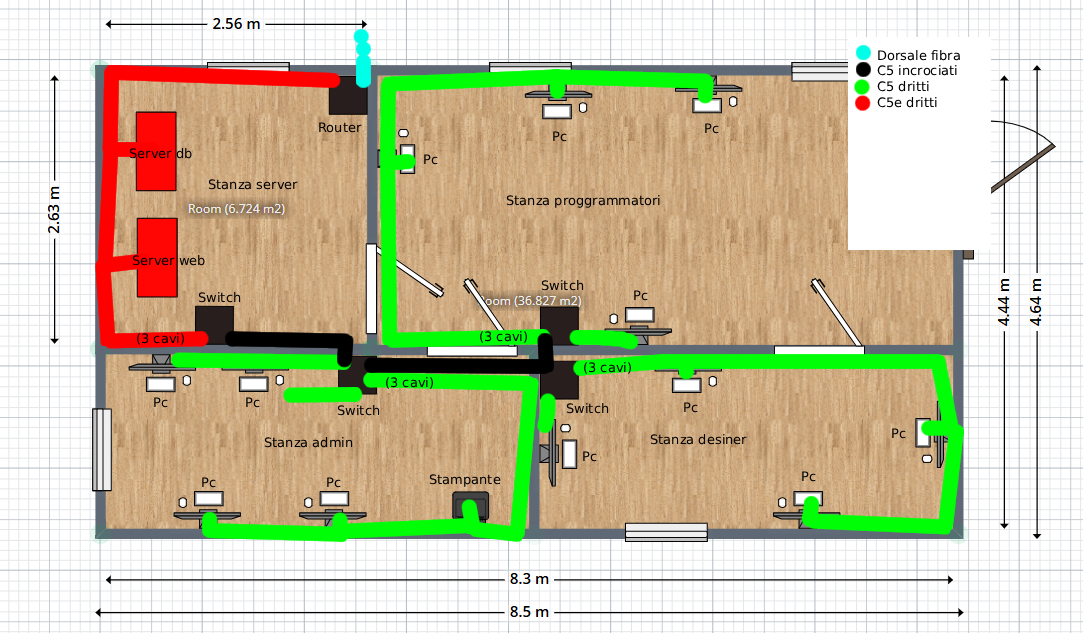
<style>
.page{position:relative;width:1083px;height:633px;background:#ffffff}
.page>*{position:absolute;margin:0}
.t1{font:13px "DejaVuSans";color:#000000}
</style>
<div class="page">
<p class="t1" style="left:877px;top:50px;width:83px;height:58px">Dorsale fibra<br>C5 incrociati<br>C5 dritti<br>C5e dritti</p>
<p class="t1" style="left:319px;top:122px;width:43px;height:11px">Router</p>
<p class="t1" style="left:705px;top:123px;width:14px;height:11px">Pc</p>
<p class="t1" style="left:553px;top:131px;width:14px;height:11px">Pc</p>
<p class="t1" style="left:129px;top:148px;width:63px;height:11px">Server db</p>
<p class="t1" style="left:424px;top:154px;width:14px;height:11px">Pc</p>
<p class="t1" style="left:208px;top:179px;width:90px;height:11px">Stanza server</p>
<p class="t1" style="left:506px;top:195px;width:154px;height:13px">Stanza proggrammatori</p>
<p class="t1" style="left:132px;top:255px;width:73px;height:11px">Server web</p>
<p class="t1" style="left:541px;top:280px;width:43px;height:11px">Switch</p>
<p class="t1" style="left:198px;top:292px;width:43px;height:11px">Switch</p>
<p class="t1" style="left:634px;top:290px;width:14px;height:11px">Pc</p>
<p class="t1" style="left:137px;top:333px;width:47px;height:12px">(3 cavi)</p>
<p class="t1" style="left:480px;top:331px;width:47px;height:12px">(3 cavi)</p>
<p class="t1" style="left:584px;top:362px;width:47px;height:12px">(3 cavi)</p>
<p class="t1" style="left:386px;top:377px;width:47px;height:12px">(3 cavi)</p>
<p class="t1" style="left:154px;top:397px;width:14px;height:11px">Pc</p>
<p class="t1" style="left:246px;top:397px;width:14px;height:11px">Pc</p>
<p class="t1" style="left:337px;top:405px;width:43px;height:11px">Switch</p>
<p class="t1" style="left:566px;top:403px;width:43px;height:11px">Switch</p>
<p class="t1" style="left:684px;top:402px;width:14px;height:11px">Pc</p>
<p class="t1" style="left:264px;top:437px;width:89px;height:11px">Stanza admin</p>
<p class="t1" style="left:650px;top:434px;width:97px;height:11px">Stanza desiner</p>
<p class="t1" style="left:892px;top:428px;width:14px;height:11px">Pc</p>
<p class="t1" style="left:583px;top:451px;width:14px;height:11px">Pc</p>
<p class="t1" style="left:802px;top:471px;width:14px;height:11px">Pc</p>
<p class="t1" style="left:202px;top:477px;width:14px;height:11px">Pc</p>
<p class="t1" style="left:327px;top:477px;width:14px;height:11px">Pc</p>
<p class="t1" style="left:429px;top:474px;width:72px;height:13px">Stampante</p>
</div>
